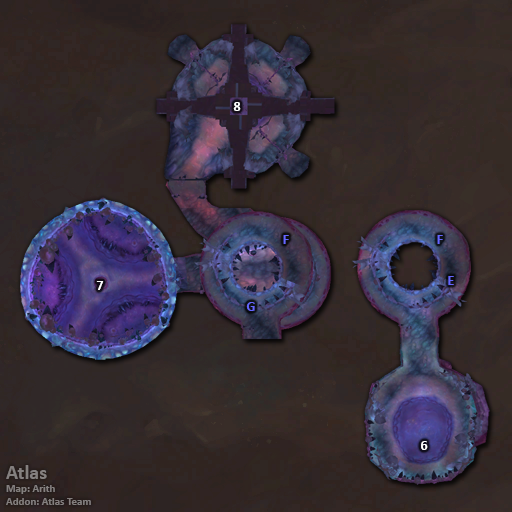
<style>
.page{position:relative;width:512px;height:512px}
.page>*{position:absolute;margin:0}
.t1{font:14px "Calibri-Bold";color:#ffffff}
.t2{font:14px "Calibri-Bold";color:#6666ff}
.t3{font:11px "Calibri-Bold";color:#847f7e}
.t4{font:20px "Calibri-Bold";color:#847f7e}
</style>
<div class="page">
<p class="t1" style="left:233px;top:102px;width:8px;height:9px">8</p>
<p class="t2" style="left:283px;top:235px;width:6px;height:9px">F</p>
<p class="t2" style="left:437px;top:235px;width:6px;height:9px">F</p>
<p class="t1" style="left:96px;top:281px;width:8px;height:9px">7</p>
<p class="t2" style="left:448px;top:276px;width:6px;height:9px">E</p>
<p class="t2" style="left:246px;top:302px;width:9px;height:9px">G</p>
<p class="t1" style="left:421px;top:441px;width:7px;height:9px">6</p>
<p class="t3" style="left:6px;top:465px;width:85px;height:40px"><span class="t4">Atlas<br></span>Map: Arith<br>Addon: Atlas Team</p>
</div>
